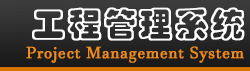
<style>
.page{position:relative;width:250px;height:71px}
.page>*{position:absolute;margin:0}
.t1{font:34px "STCaiyun";letter-spacing:0.025em;color:#ffffff;font-weight:bold}
.t2{font:16px "JavaneseText";letter-spacing:0.025em;color:#ee8c1d;font-weight:bold}
</style>
<div class="page">
<p class="t1" style="left:32px;top:7px;width:213px;height:34px">工程管理系统</p>
<p class="t2" style="left:26px;top:46px;width:218px;height:17px">Project Management System</p>
</div>
